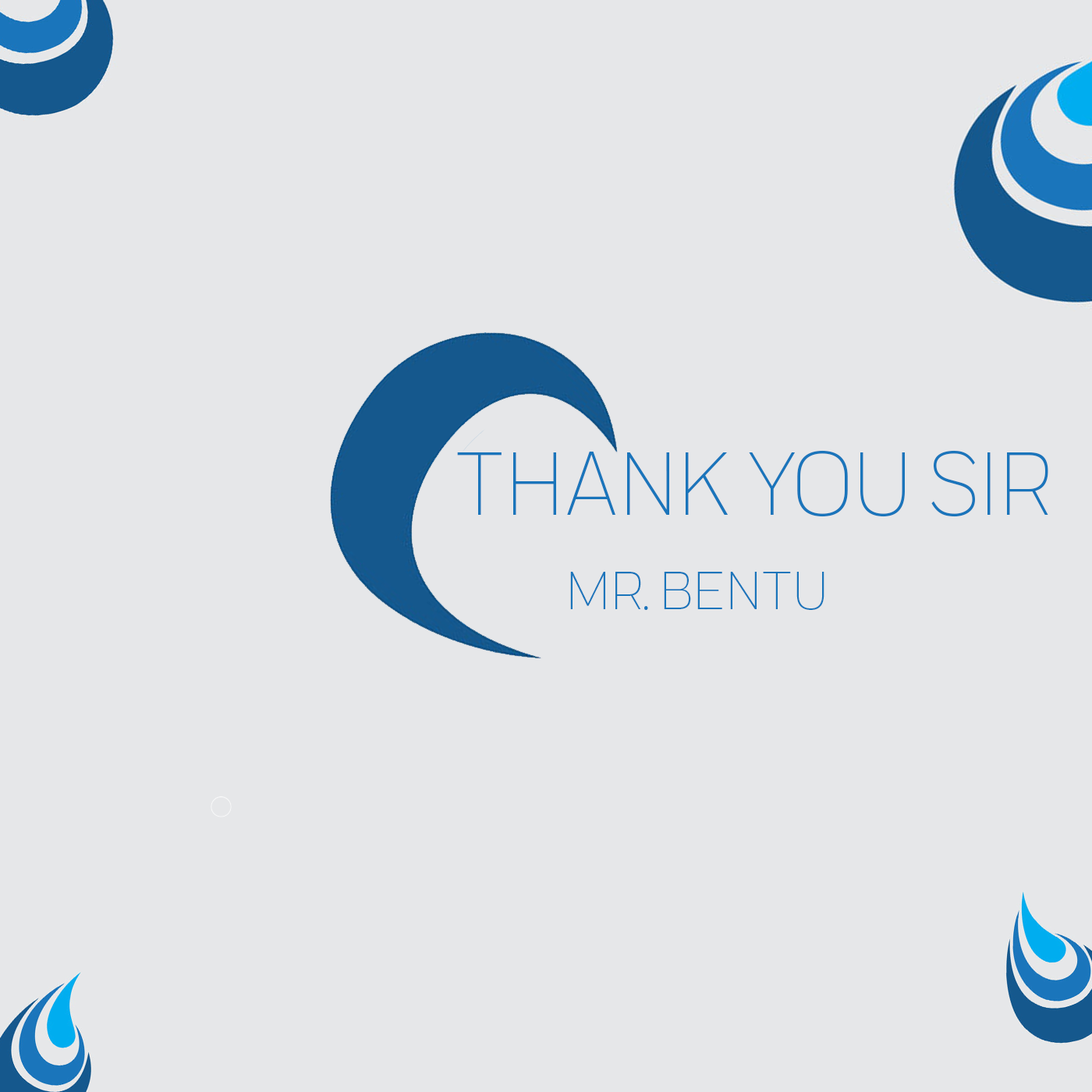
<style>
.page{position:relative;width:1092px;height:1092px;background:#e6e7e9}
.page>*{position:absolute;margin:0}
.t1{font:94.4px "Praktika-Light";color:#1a75bb;scale:0.97 1}
.t2{font:56.2px "Praktika-Light";color:#1a75bb}
</style>
<div class="page">
<p class="t1" style="left:457px;top:450px;width:591px;height:67px">THANK YOU SIR</p>
<p class="t2" style="left:570px;top:572px;width:254px;height:38px">MR. BENTU</p>
</div>
